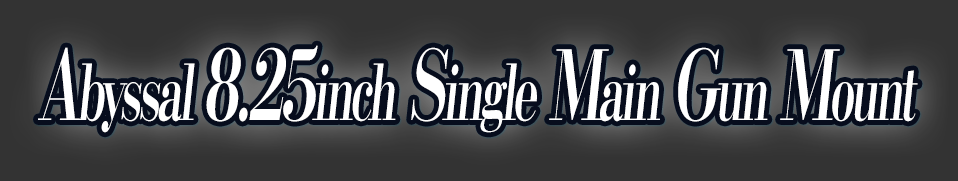
<style>
.page{position:relative;width:958px;height:181px;background:#333333}
.page>*{position:absolute;margin:0}
.t1{font:76.8px "KochoStd-Heavy";letter-spacing:-0.08em;color:#ffffff;font-style:italic;scale:0.6 1}
.t2{font:96px "KochoStd-Heavy";letter-spacing:-0.08em;color:#ffffff;font-style:italic;scale:0.6 1}
</style>
<div class="page">
<p class="t1" style="left:38px;top:45px;width:880px;height:88px"><span class="t2">A</span>byssal <span class="t2">8.25</span>inch<span class="t2"> S</span>ingle<span class="t2"> M</span>ain<span class="t2"> G</span>un<span class="t2"> M</span>ount</p>
</div>
